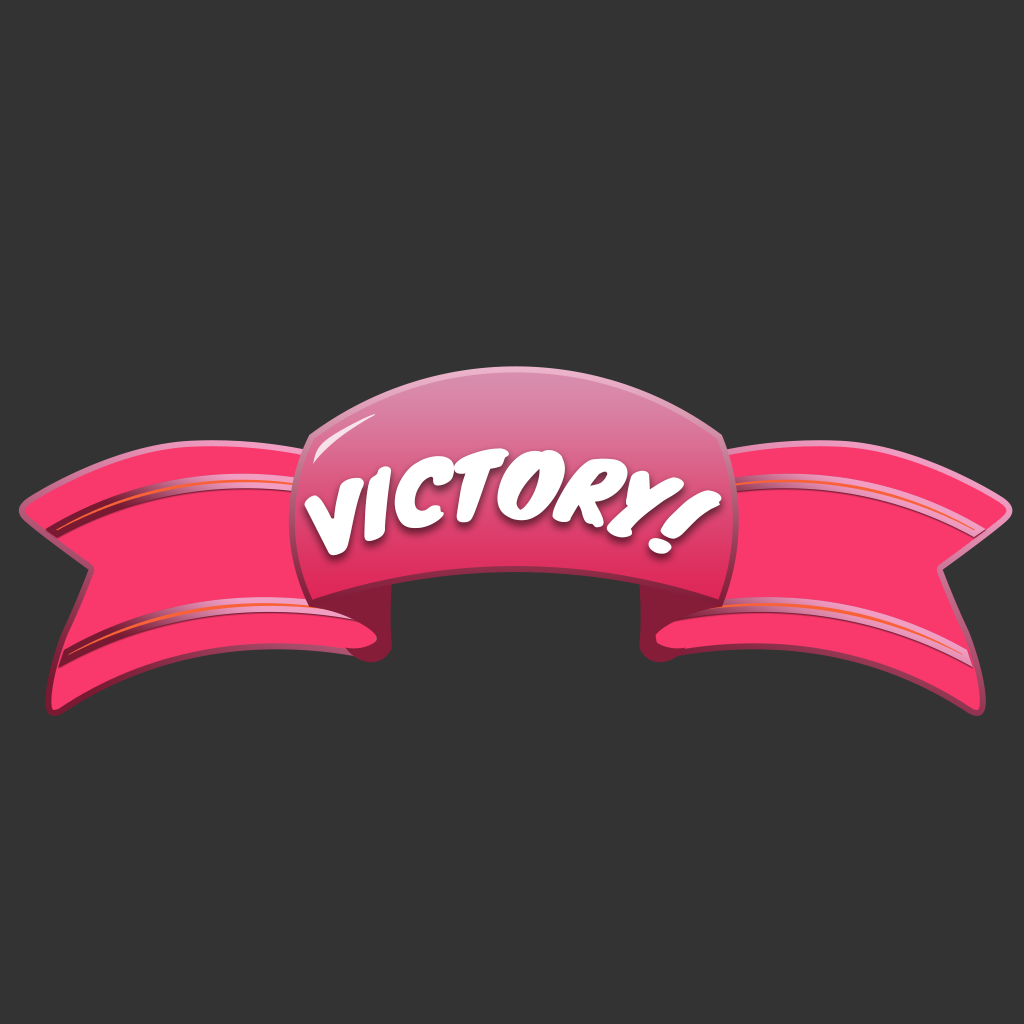
<style>
.page{position:relative;width:1024px;height:1024px;background:#333333}
.page>*{position:absolute;margin:0}
.t1{font:82.2px "Knewave-Regular";color:#ffffff}
</style>
<div class="page">
<p class="t1" style="left:304px;top:448px;width:418px;height:108px">VICTORY!</p>
</div>
